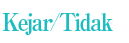
<style>
.page{position:relative;width:129px;height:43px;background:#ffffff}
.page>*{position:absolute;margin:0}
.t1{font:24px "RyuminPro-ExBold";letter-spacing:-0.08em;color:#1dbcc0;scale:0.9 1}
</style>
<div class="page">
<p class="t1" style="left:2px;top:13px;width:111px;height:22px">Kejar/Tidak</p>
</div>
